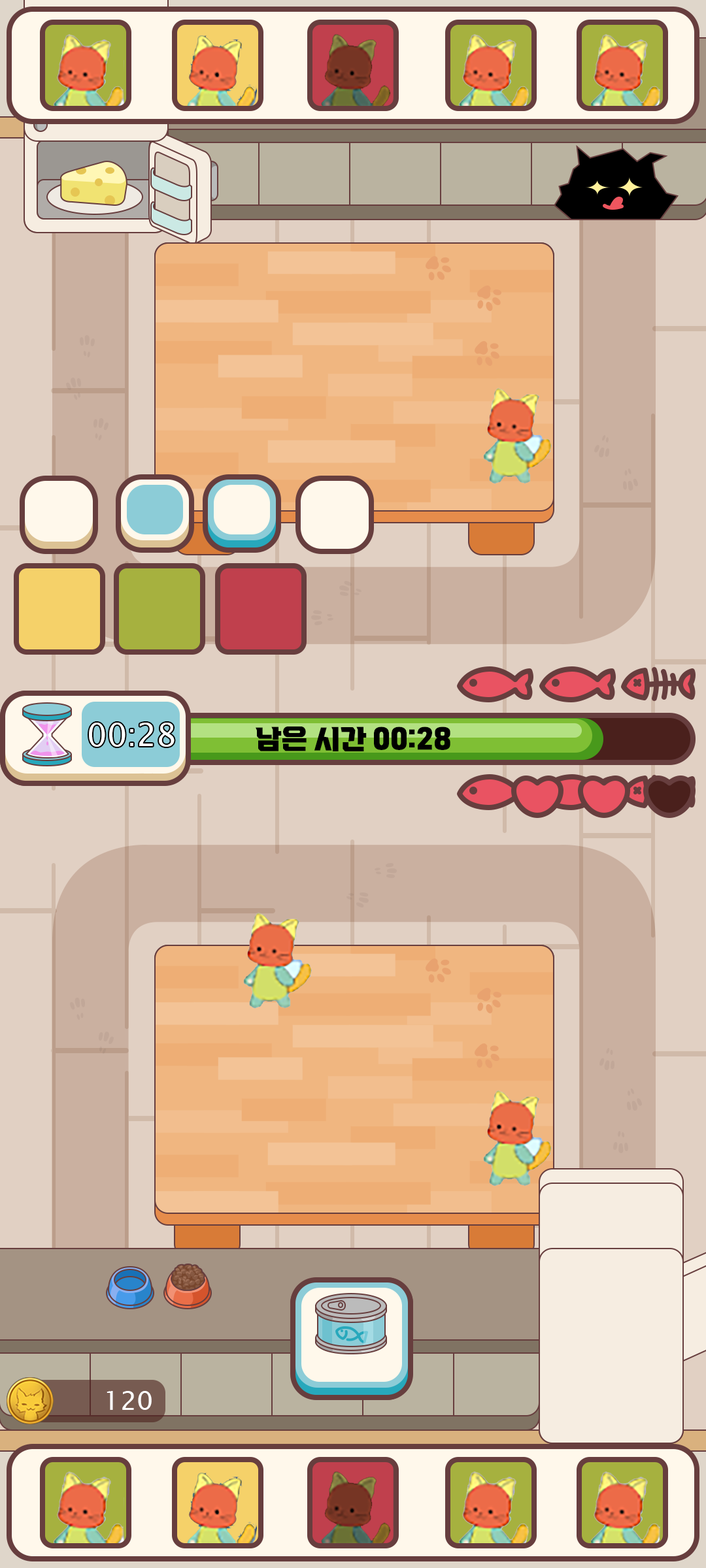
<style>
.page{position:relative;width:706px;height:1568px}
.page>*{position:absolute;margin:0}
.t1{font:31.4px "LucidaSansUnicode";color:#ffffff}
.t2{font:26.1px "VITRO-CORE-OTF";color:#000000}
.t3{font:26.1px "LucidaSansUnicode";color:#ffffff}
</style>
<div class="page">
<p class="t1" style="left:89px;top:723px;width:85px;height:24px">00:28</p>
<p class="t2" style="left:255px;top:727px;width:195px;height:24px">남은 시간 00:28</p>
<p class="t3" style="left:106px;top:1391px;width:46px;height:19px">120</p>
</div>
